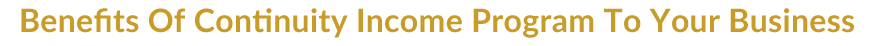
<style>
.page{position:relative;width:870px;height:46px;background:#ffffff}
.page>*{position:absolute;margin:0}
.t1{font:32px "Lato-Bold";letter-spacing:0.01em;color:#c99c29}
</style>
<div class="page">
<p class="t1" style="left:21px;top:8px;width:833px;height:30px">Benefits Of Continuity Income Program To Your Business</p>
</div>
